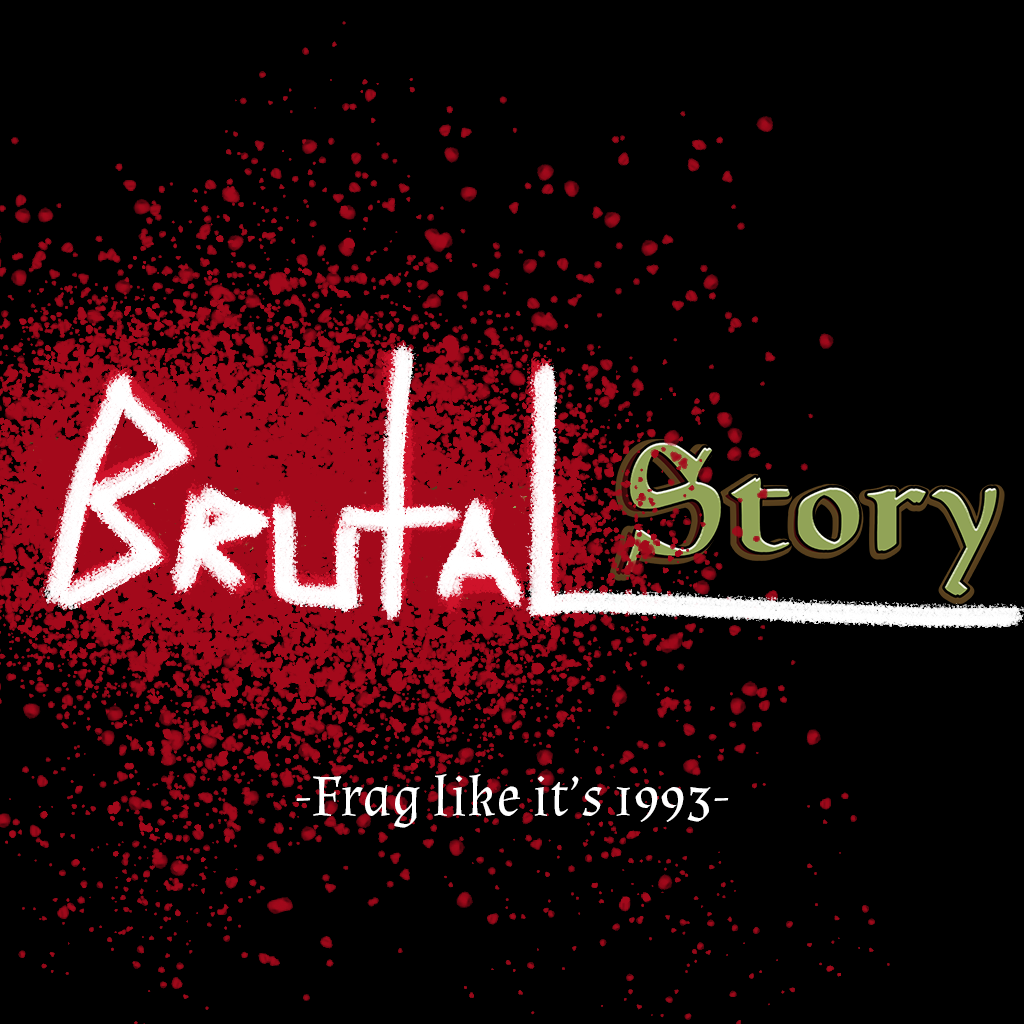
<style>
.page{position:relative;width:1024px;height:1024px;background:#000000}
.page>*{position:absolute;margin:0}
.t1{font:58.3px "Almendra-Regular";color:#ffffff}
</style>
<div class="page">
<p class="t1" style="left:296px;top:774px;width:433px;height:54px">-Frag like it’s 1993-</p>
</div>
